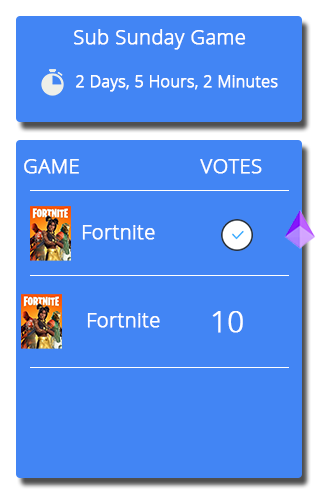
<style>
.page{position:relative;width:318px;height:500px;background:#4285f4}
.page>*{position:absolute;margin:0}
.t1{font:20px "OpenSans-Light";color:#ffffff;font-weight:bold}
.t2{font:16px "OpenSans-Light";color:#ffffff;font-weight:bold}
.t3{font:28.9px "OpenSans-Light";color:#ffffff;font-weight:bold}
</style>
<div class="page">
<p class="t1" style="left:74px;top:29px;width:172px;height:21px">Sub Sunday Game</p>
<p class="t2" style="left:76px;top:75px;width:202px;height:17px">2 Days, 5 Hours, 2 Minutes</p>
<p class="t1" style="left:24px;top:159px;width:238px;height:15px">GAME                     VOTES</p>
<p class="t1" style="left:82px;top:225px;width:73px;height:15px">Fortnite</p>
<p class="t1" style="left:87px;top:313px;width:73px;height:15px">Fortnite</p>
<p class="t3" style="left:212px;top:311px;width:31px;height:22px">10</p>
</div>
